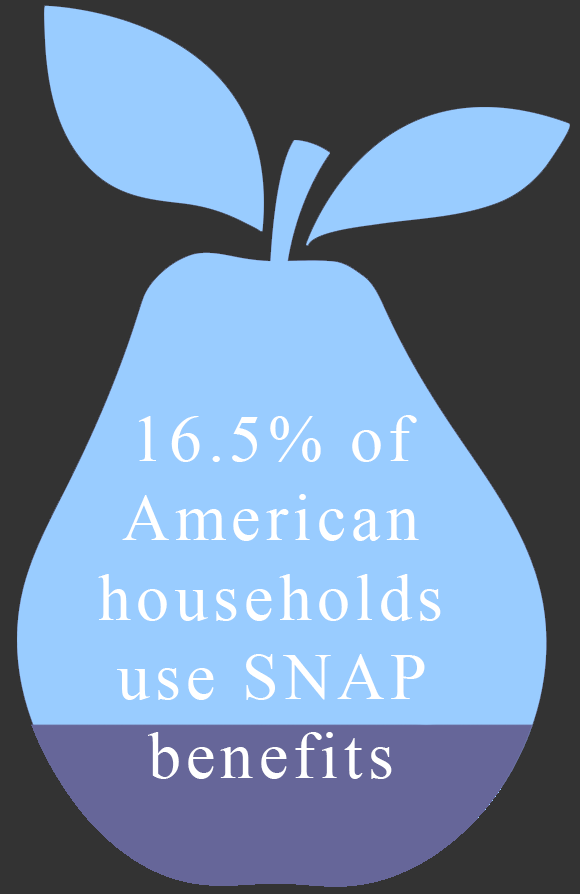
<style>
.page{position:relative;width:580px;height:894px;background:#99ccff}
.page>*{position:absolute;margin:0}
.t1{font:66px "TimesNewRomanPSMT";letter-spacing:0.08em;color:#ffffff}
</style>
<div class="page">
<p class="t1" style="left:98px;top:415px;width:343px;height:364px;text-align:center">16.5% of American households use SNAP benefits</p>
</div>
